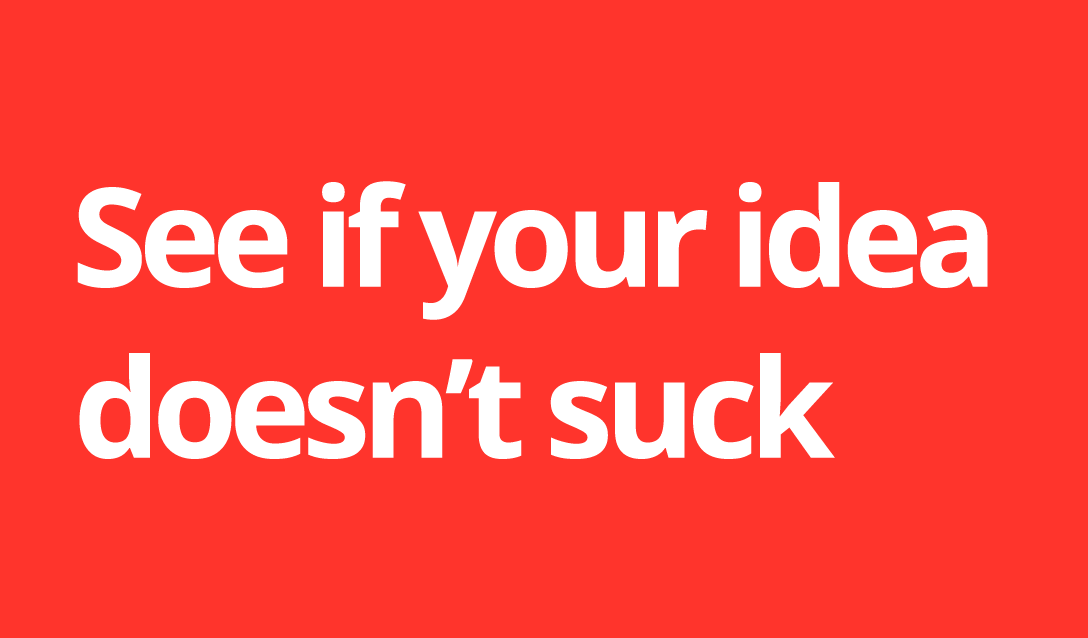
<style>
.page{position:relative;width:1088px;height:638px;background:#ff342c}
.page>*{position:absolute;margin:0}
.t1{font:137.5px "OpenSans-Bold";letter-spacing:-0.06em;color:#ffffff}
</style>
<div class="page">
<p class="t1" style="left:77px;top:181px;width:911px;height:139px">See if your idea</p>
<p class="t1" style="left:79px;top:353px;width:756px;height:106px">doesn’t suck</p>
</div>
